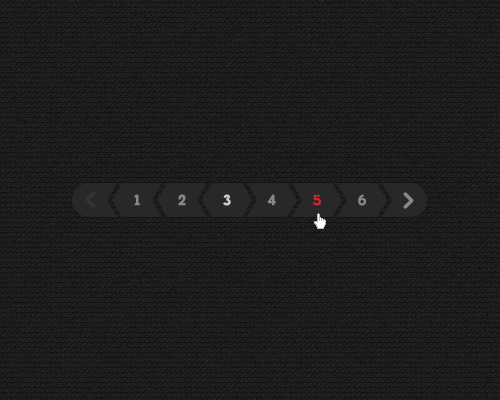
<style>
.page{position:relative;width:500px;height:400px;background:#202020}
.page>*{position:absolute;margin:0}
.t1{font:15px "Edmondsans-Bold";color:#888888}
.t2{font:15px "Edmondsans-Bold";color:#cccccc}
.t3{font:15px "Edmondsans-Bold";color:#c9282d}
</style>
<div class="page">
<p class="t1" style="left:134px;top:194px;width:6px;height:12px">1</p>
<p class="t1" style="left:134px;top:194px;width:6px;height:12px">1</p>
<p class="t1" style="left:178px;top:194px;width:8px;height:12px">2</p>
<p class="t1" style="left:178px;top:194px;width:8px;height:12px">2</p>
<p class="t2" style="left:223px;top:194px;width:8px;height:12px">3</p>
<p class="t2" style="left:223px;top:194px;width:8px;height:12px">3</p>
<p class="t1" style="left:268px;top:194px;width:8px;height:12px">4</p>
<p class="t1" style="left:268px;top:194px;width:8px;height:12px">4</p>
<p class="t3" style="left:313px;top:194px;width:8px;height:12px">5</p>
<p class="t3" style="left:313px;top:194px;width:8px;height:12px">5</p>
<p class="t1" style="left:358px;top:194px;width:8px;height:12px">6</p>
<p class="t1" style="left:358px;top:194px;width:8px;height:12px">6</p>
</div>
